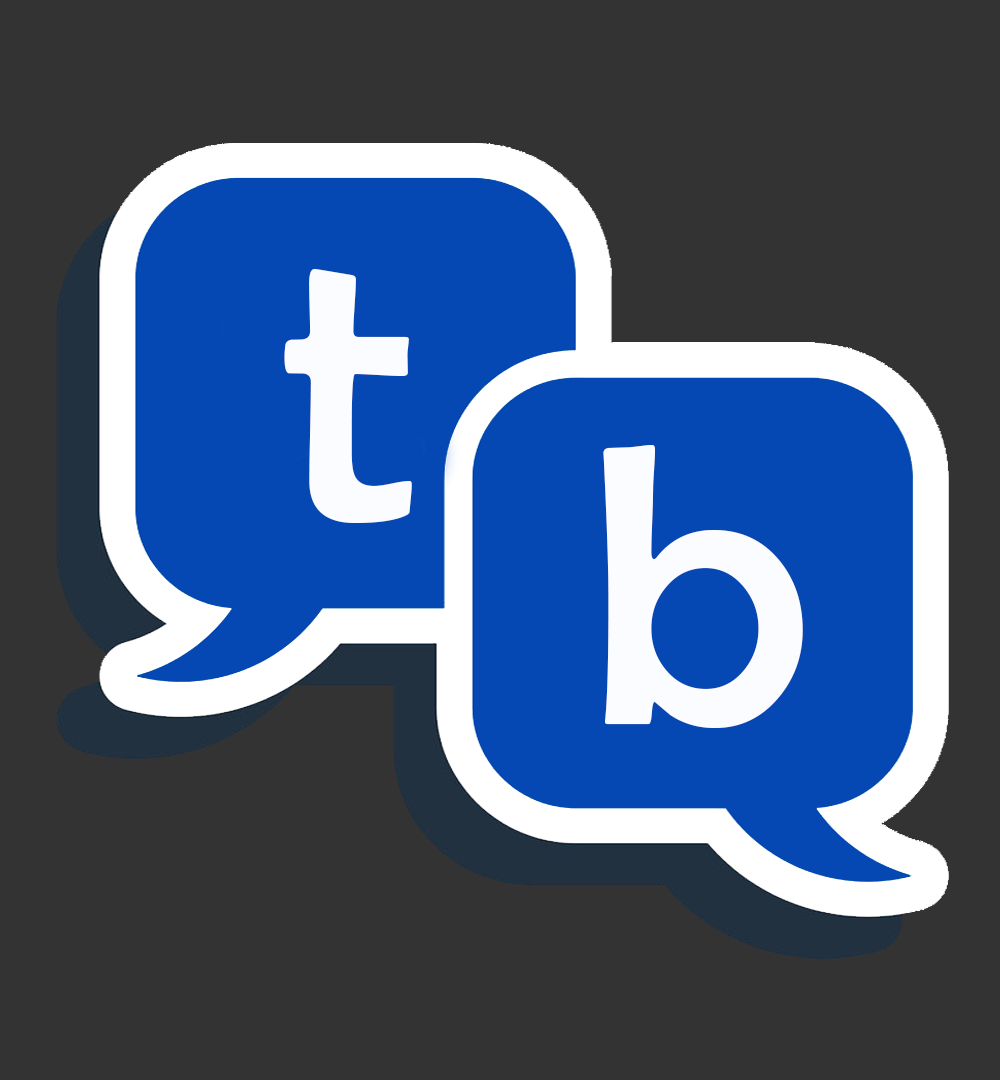
<style>
.page{position:relative;width:1000px;height:1080px;background:#333333}
.page>*{position:absolute;margin:0}
.t1{font:400px "BerlinSansFB-Reg";color:#fafcff}
</style>
<div class="page">
<p class="t1" style="left:284px;top:268px;width:128px;height:255px">t</p>
<p class="t1" style="left:603px;top:444px;width:200px;height:284px">b</p>
</div>
